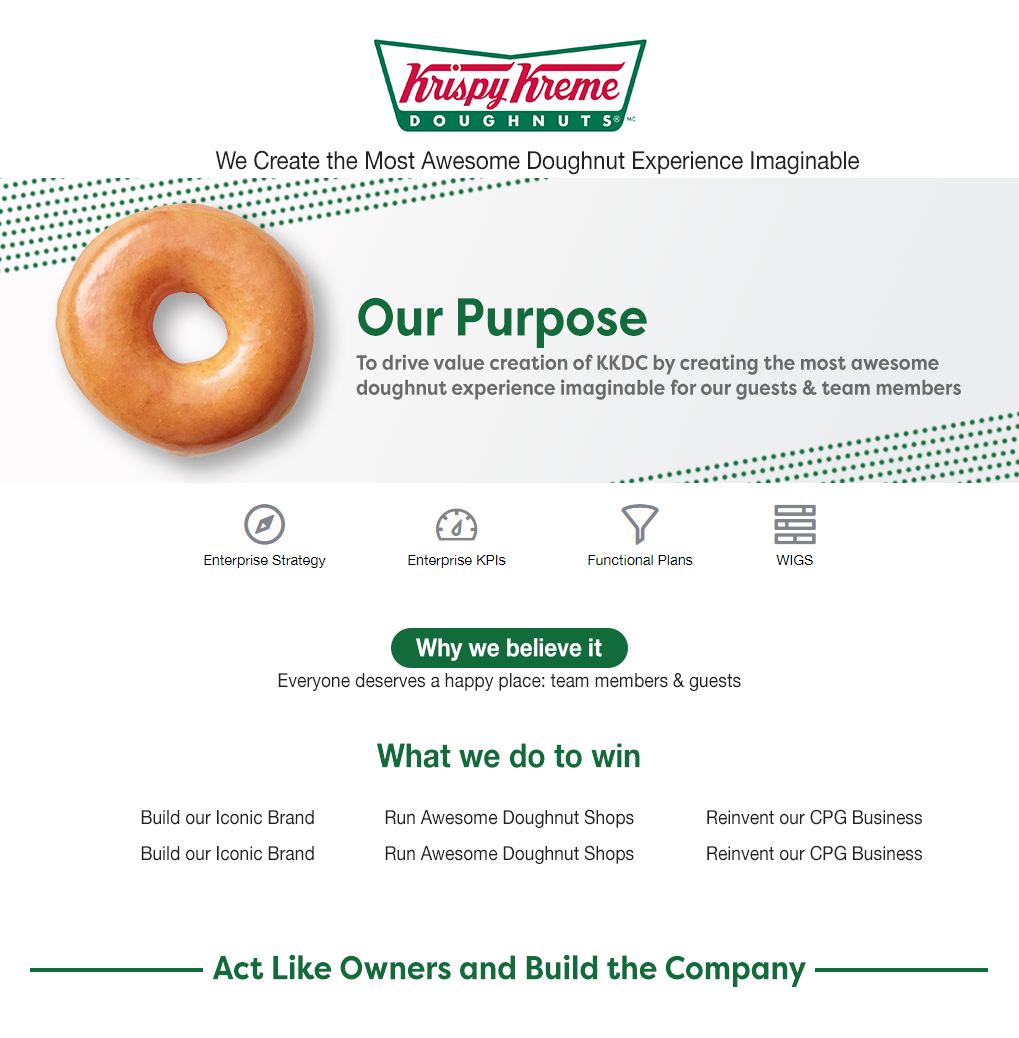
<style>
.page{position:relative;width:1019px;height:1038px;background:#ffffff}
.page>*{position:absolute;margin:0}
.t1{font:25px "HelveticaNeue";color:#212121;scale:0.9 1}
.t2{font:53.3px "FilsonProBold";color:#126b3b;scale:0.9 1}
.t3{font:20.8px "FilsonProBold";color:#6b6b6b;scale:0.9 1}
.t4{font:25px "HelveticaNeueBold";color:#ffffff;scale:0.9 1}
.t5{font:19.4px "HelveticaNeue";color:#212121;scale:0.9 1}
.t6{font:33.3px "HelveticaNeueBold";color:#126b3b;scale:0.9 1}
.t7{font:33.3px "FilsonProBold";color:#126b3b;scale:0.9 1}
</style>
<div class="page">
<p class="t1" style="left:215px;top:150px;width:644px;height:25px">We Create the Most Awesome Doughnut Experience Imaginable</p>
<p class="t2" style="left:358px;top:297px;width:289px;height:51px">Our Purpose</p>
<p class="t3" style="left:356px;top:354px;width:605px;height:46px">To drive value creation of KKDC by creating the most awesome <br>doughnut experience imaginable for our guests &amp; team members</p>
<p class="t4" style="left:416px;top:638px;width:186px;height:23px">Why we believe it</p>
<p class="t5" style="left:278px;top:673px;width:463px;height:18px">Everyone deserves a happy place: team members &amp; guests</p>
<p class="t6" style="left:377px;top:743px;width:263px;height:25px">What we do to win</p>
<p class="t5" style="left:385px;top:809px;width:249px;height:19px">Run Awesome Doughnut Shops</p>
<p class="t5" style="left:707px;top:809px;width:215px;height:16px">Reinvent our CPG Business</p>
<p class="t5" style="left:141px;top:810px;width:173px;height:15px">Build our Iconic Brand</p>
<p class="t5" style="left:141px;top:846px;width:173px;height:15px">Build our Iconic Brand</p>
<p class="t5" style="left:385px;top:845px;width:249px;height:19px">Run Awesome Doughnut Shops</p>
<p class="t5" style="left:707px;top:845px;width:215px;height:16px">Reinvent our CPG Business</p>
<p class="t7" style="left:212px;top:954px;width:594px;height:33px">Act Like Owners and Build the Company</p>
</div>
